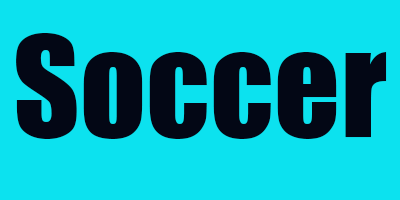
<style>
.page{position:relative;width:400px;height:200px;background:#0ce2ef}
.page>*{position:absolute;margin:0}
.t1{font:129.5px "Impact";color:#030715}
</style>
<div class="page">
<p class="t1" style="left:16px;top:33px;width:371px;height:106px">Soccer</p>
</div>
